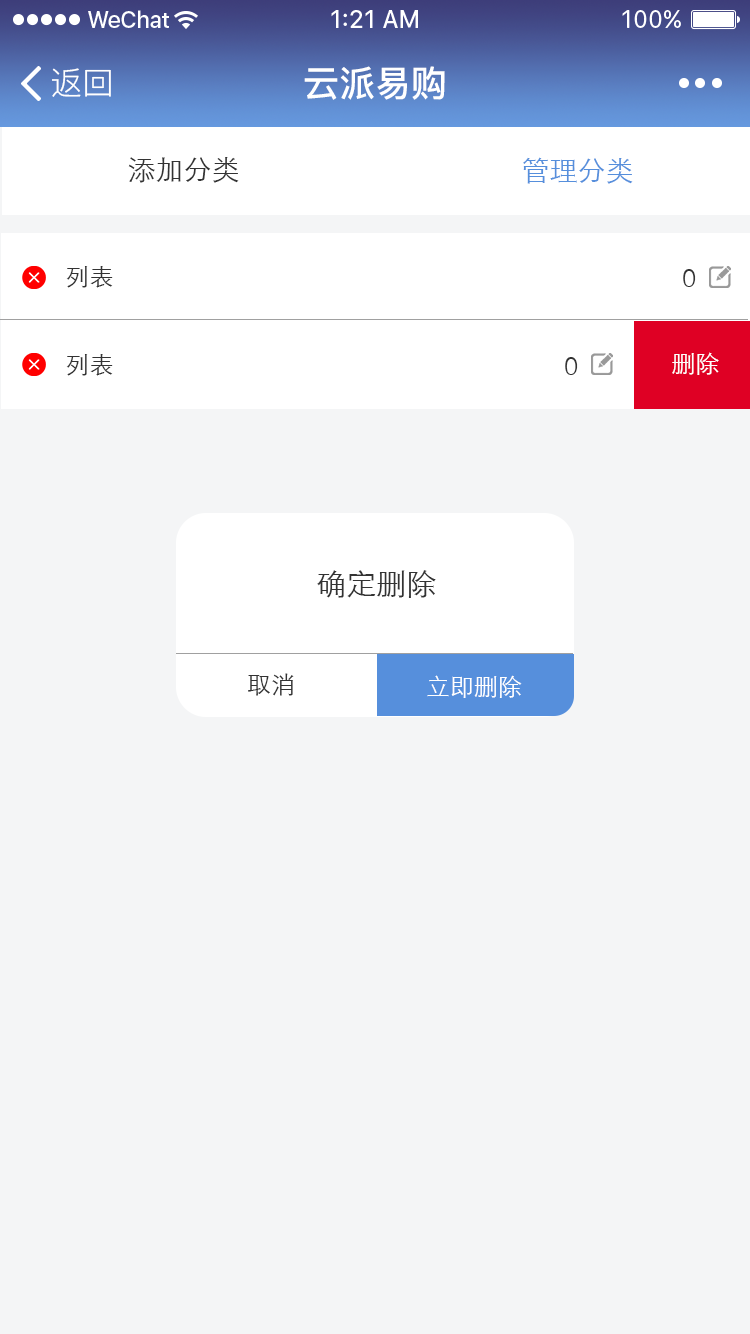
<style>
.page{position:relative;width:750px;height:1334px;background:#f4f5f6}
.page>*{position:absolute;margin:0}
.t1{font:32px "PingFang-SC-Regular";color:#ffffff}
.t2{font:36px "PingFang-SC-Bold";color:#ffffff}
.t3{font:28px "STXihei";color:#333333}
.t4{font:28px "STXihei";color:#568fdc}
.t5{font:24px "STXihei";color:#333333}
.t6{font:24px "STXihei";color:#ffffff}
.t7{font:30px "STXihei";color:#333333}
</style>
<div class="page">
<p class="t1" style="left:52px;top:68px;width:59px;height:29px">返回</p>
<p class="t2" style="left:304px;top:66px;width:141px;height:34px">云派易购</p>
<p class="t3" style="left:128px;top:157px;width:111px;height:26px">添加分类</p>
<p class="t4" style="left:523px;top:157px;width:110px;height:27px">管理分类</p>
<p class="t5" style="left:66px;top:266px;width:47px;height:22px">列表</p>
<p class="t5" style="left:683px;top:269px;width:13px;height:18px">0</p>
<p class="t6" style="left:672px;top:352px;width:47px;height:23px">删除</p>
<p class="t5" style="left:66px;top:354px;width:47px;height:22px">列表</p>
<p class="t5" style="left:565px;top:357px;width:13px;height:18px">0</p>
<p class="t7" style="left:317px;top:570px;width:119px;height:28px">确定删除</p>
<p class="t5" style="left:248px;top:673px;width:46px;height:23px">取消</p>
<p class="t6" style="left:427px;top:675px;width:95px;height:23px">立即删除</p>
</div>
